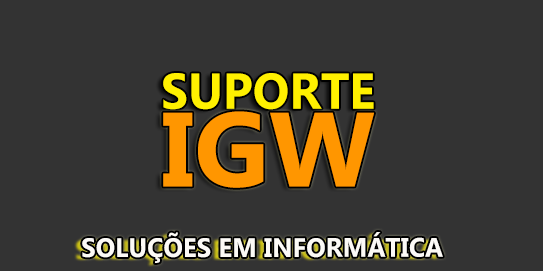
<style>
.page{position:relative;width:543px;height:271px;background:#333333}
.page>*{position:absolute;margin:0}
.t1{font:50.2px "Ebrima-Bold";color:#fff000;scale:0.96 1}
.t2{font:105.1px "Ebrima-Bold";color:#ff9600}
.t3{font:26.7px "Ebrima-Bold";color:#ffffff;scale:0.97 1}
</style>
<div class="page">
<p class="t1" style="left:163px;top:73px;width:211px;height:37px">SUPORTE</p>
<p class="t2" style="left:163px;top:111px;width:211px;height:77px">IGW</p>
<p class="t3" style="left:82px;top:232px;width:361px;height:31px">SOLUÇÕES EM INFORMÁTICA</p>
</div>
